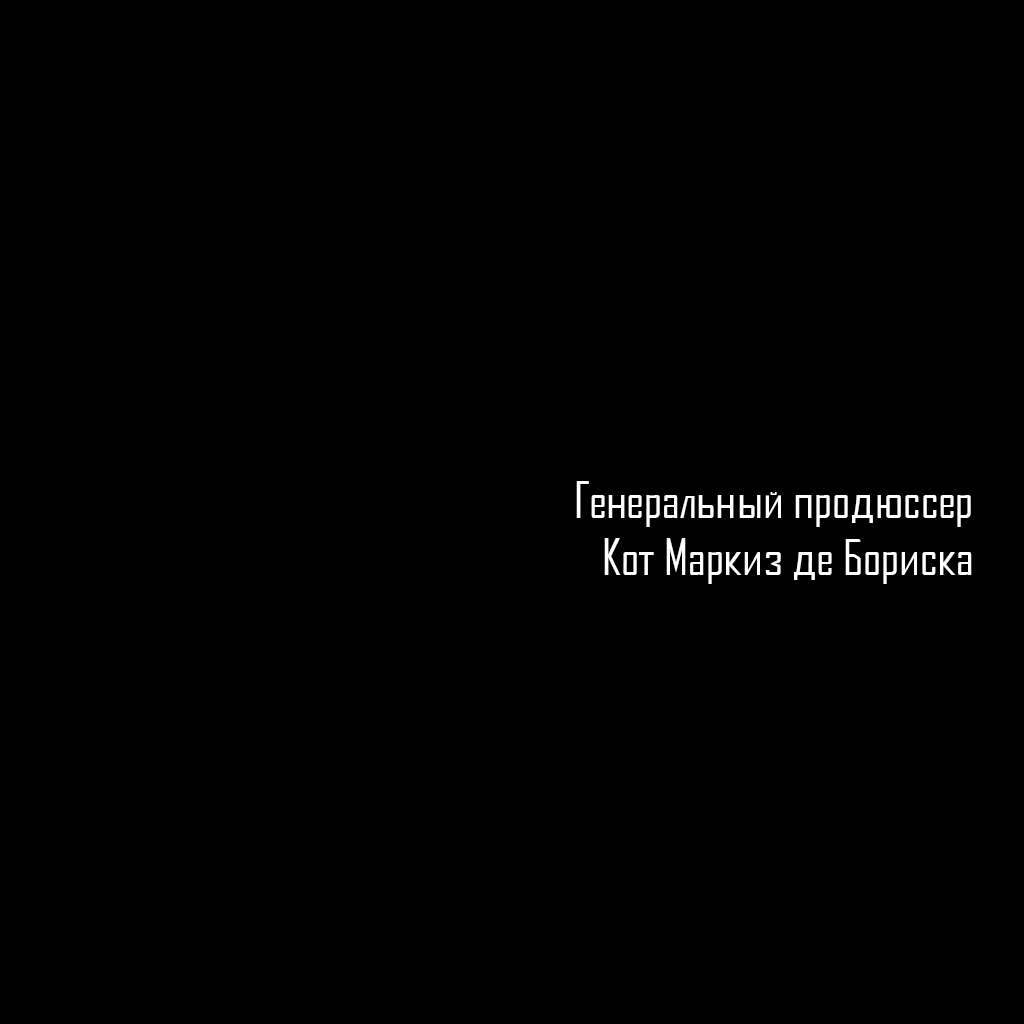
<style>
.page{position:relative;width:1024px;height:1024px;background:#000000}
.page>*{position:absolute;margin:0}
.t1{font:48px "AgencyFBCyrillic";color:#ffffff}
</style>
<div class="page">
<p class="t1" style="left:576px;top:481px;width:396px;height:103px;text-align:right">Генеральный продюссер<br>Кот Маркиз де Бориска</p>
</div>
